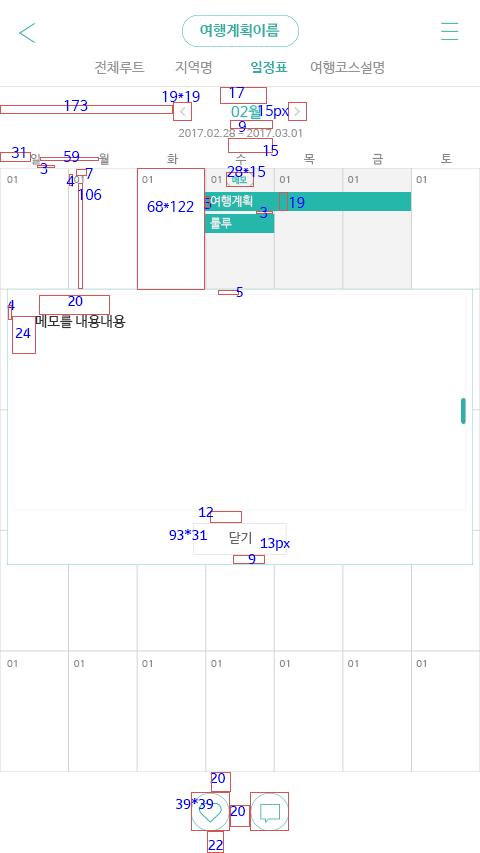
<style>
.page{position:relative;width:480px;height:853px;background:#ffffff}
.page>*{position:absolute;margin:0}
.t1{font:15px "NanumBarunGothicBold";color:#36ada4}
.t2{font:14px "NanumBarunGothic";color:#959595}
.t3{font:14px "NanumBarunGothicBold";color:#36ada4}
.t4{font:14px "NanumBarunGothic";color:#0000ff}
.t5{font:15px "NanumBarunGothic";color:#25b7aa}
.t6{font:11px "NanumBarunGothic";color:#959595}
.t7{font:11.8px "NanumBarunGothic";color:#898989}
.t8{font:10.4px "NanumBarunGothic";color:#898989}
.t9{font:8.8px "NanumBarunGothic";color:#25b7aa;scale:0.96 1}
.t10{font:12px "NanumBarunGothic";color:#efefef}
.t11{font:13px "MoebiusKorea-Regular";color:#0000ff}
.t12{font:14px "NanumBarunGothic";color:#313131}
.t13{font:12.9px "NanumBarunGothic";letter-spacing:0.025em;color:#626262}
</style>
<div class="page">
<p class="t1" style="left:200px;top:23px;width:80px;height:15px">여행계획이름</p>
<p class="t2" style="left:94px;top:60px;width:51px;height:14px">전체루트</p>
<p class="t2" style="left:175px;top:61px;width:37px;height:13px">지역명</p>
<p class="t3" style="left:251px;top:61px;width:37px;height:13px">일정표</p>
<p class="t2" style="left:310px;top:61px;width:74px;height:13px">여행코스설명</p>
<p class="t4" style="left:229px;top:87px;width:15px;height:11px">17</p>
<p class="t4" style="left:64px;top:100px;width:24px;height:11px">173</p>
<p class="t4" style="left:162px;top:91px;width:38px;height:11px">19*19</p>
<p class="t5" style="left:231px;top:105px;width:30px;height:15px">02월</p>
<p class="t4" style="left:258px;top:105px;width:31px;height:14px">15px</p>
<p class="t4" style="left:238px;top:121px;width:8px;height:11px">9</p>
<p class="t6" style="left:178px;top:129px;width:124px;height:8px">2017.02.28 - 2017.03.01</p>
<p class="t4" style="left:12px;top:147px;width:13px;height:11px">31</p>
<p class="t4" style="left:263px;top:145px;width:16px;height:11px">15</p>
<p class="t7" style="left:30px;top:153px;width:10px;height:12px">일</p>
<p class="t4" style="left:63px;top:151px;width:17px;height:11px">59</p>
<p class="t7" style="left:99px;top:153px;width:10px;height:12px">월</p>
<p class="t7" style="left:167px;top:153px;width:12px;height:12px">화</p>
<p class="t7" style="left:235px;top:154px;width:11px;height:11px">수</p>
<p class="t7" style="left:304px;top:154px;width:11px;height:11px">목</p>
<p class="t7" style="left:372px;top:153px;width:12px;height:12px">금</p>
<p class="t7" style="left:441px;top:154px;width:11px;height:9px">토</p>
<p class="t4" style="left:40px;top:163px;width:8px;height:11px">3</p>
<p class="t4" style="left:85px;top:168px;width:8px;height:11px">7</p>
<p class="t4" style="left:227px;top:166px;width:39px;height:11px">28*15</p>
<p class="t8" style="left:7px;top:176px;width:10px;height:7px">01</p>
<p class="t4" style="left:66px;top:176px;width:9px;height:11px">4</p>
<p class="t8" style="left:74px;top:176px;width:10px;height:7px">01</p>
<p class="t8" style="left:142px;top:176px;width:10px;height:7px">01</p>
<p class="t8" style="left:211px;top:176px;width:10px;height:7px">01</p>
<p class="t9" style="left:232px;top:176px;width:16px;height:9px">메모</p>
<p class="t8" style="left:279px;top:176px;width:11px;height:7px">01</p>
<p class="t8" style="left:348px;top:176px;width:10px;height:7px">01</p>
<p class="t8" style="left:416px;top:176px;width:10px;height:7px">01</p>
<p class="t4" style="left:78px;top:189px;width:24px;height:11px">106</p>
<p class="t4" style="left:204px;top:198px;width:8px;height:11px">5</p>
<p class="t10" style="left:210px;top:195px;width:43px;height:12px">여행계획</p>
<p class="t4" style="left:290px;top:197px;width:15px;height:11px">19</p>
<p class="t4" style="left:147px;top:201px;width:47px;height:11px">68*122</p>
<p class="t4" style="left:260px;top:207px;width:8px;height:11px">3</p>
<p class="t10" style="left:210px;top:217px;width:22px;height:12px">룰루</p>
<p class="t11" style="left:236px;top:287px;width:7px;height:10px">5</p>
<p class="t11" style="left:7px;top:300px;width:8px;height:10px">4</p>
<p class="t11" style="left:68px;top:296px;width:15px;height:10px">20</p>
<p class="t12" style="left:35px;top:315px;width:91px;height:14px">메모를 내용내용</p>
<p class="t11" style="left:15px;top:328px;width:16px;height:10px">24</p>
<p class="t11" style="left:199px;top:507px;width:15px;height:10px">12</p>
<p class="t11" style="left:169px;top:529px;width:39px;height:11px">93*31</p>
<p class="t13" style="left:229px;top:532px;width:22px;height:12px">닫기</p>
<p class="t11" style="left:260px;top:538px;width:30px;height:13px">13px</p>
<p class="t11" style="left:248px;top:554px;width:8px;height:10px">9</p>
<p class="t8" style="left:7px;top:660px;width:10px;height:7px">01</p>
<p class="t8" style="left:74px;top:660px;width:10px;height:7px">01</p>
<p class="t8" style="left:142px;top:660px;width:10px;height:7px">01</p>
<p class="t8" style="left:211px;top:660px;width:10px;height:7px">01</p>
<p class="t8" style="left:279px;top:660px;width:11px;height:7px">01</p>
<p class="t8" style="left:348px;top:660px;width:10px;height:7px">01</p>
<p class="t8" style="left:416px;top:660px;width:10px;height:7px">01</p>
<p class="t11" style="left:210px;top:773px;width:15px;height:10px">20</p>
<p class="t11" style="left:175px;top:798px;width:39px;height:11px">39*39</p>
<p class="t11" style="left:230px;top:806px;width:15px;height:10px">20</p>
<p class="t11" style="left:208px;top:840px;width:15px;height:10px">22</p>
</div>
